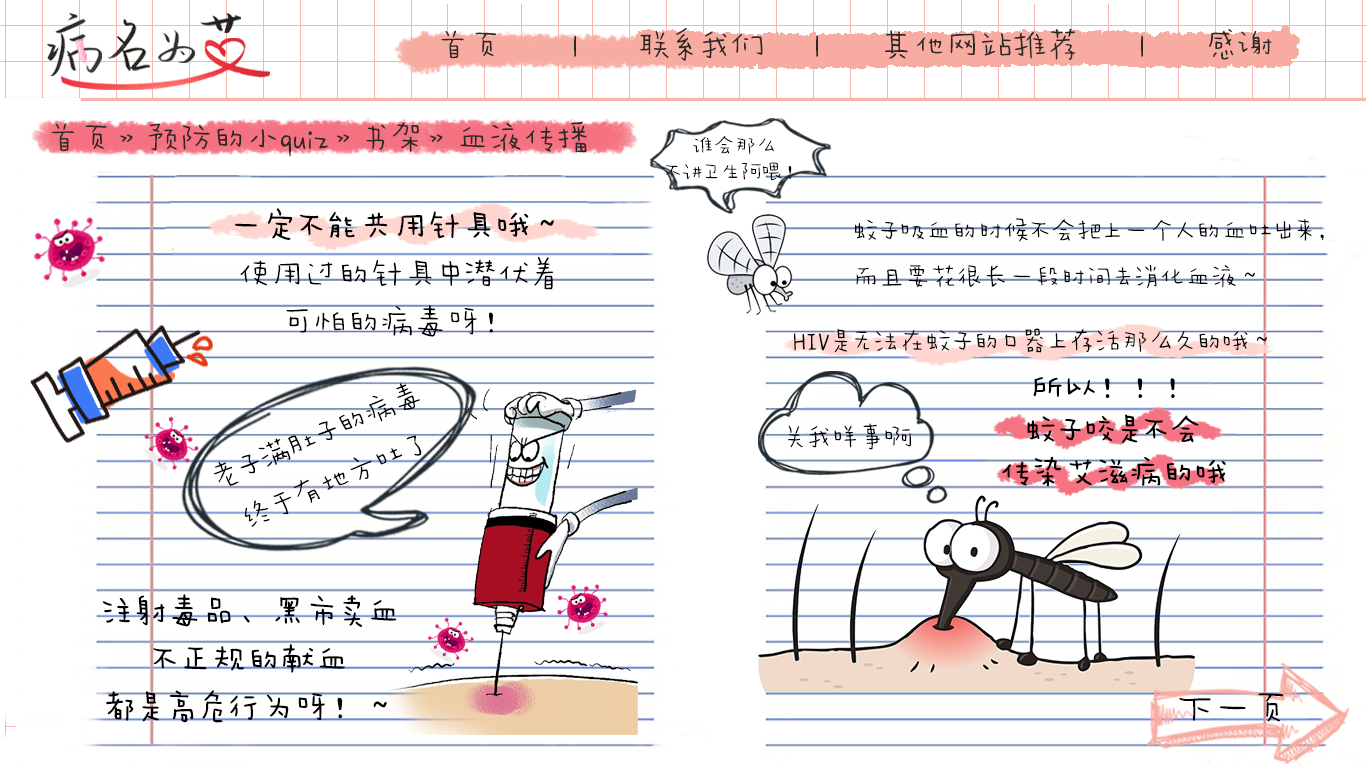
<style>
.page{position:relative;width:1366px;height:768px;background:#ffffff}
.page>*{position:absolute;margin:0}
.t1{font:33.3px "AaWanWan";color:#282a26}
.t2{font:21.2px/26.5px "AaWanWan";color:#000000}
.t3{font:33.3px/48px "AaWanWan";color:#000000}
.t4{font:33.3px/48px "AaWanWan";color:#000000;font-weight:bold}
.t5{font:25.9px/46.1px "AaWanWan";color:#000000}
.t6{font:26.5px "AaWanWan";color:#000000}
.t7{font:31.8px/42.4px "AaWanWan";color:#000000;font-weight:bold}
.t8{font:30px/48px "AaWanWan";color:#000000}
.t9{font:39.9px "AaWanWan";letter-spacing:-0.05em;color:#000000}
</style>
<div class="page">
<p class="t1" style="left:441px;top:27px;width:831px;height:34px">首页       |      联系我们     |      其他网站推荐      |      感谢</p>
<p class="t1" style="left:51px;top:121px;width:536px;height:36px">首页》预防的小quiz》书架》血液传播</p>
<p class="t2" style="left:666px;top:136px;width:126px;height:45px;text-align:center">谁会那么<br>不讲卫生阿喂！</p>
<p class="t3" style="left:235px;top:208px;width:319px;height:129px;text-align:center"><span class="t4">一定不能共用针具哦～<br></span>使用过的针具中潜伏着<br>可怕的病毒呀！</p>
<p class="t5" style="left:855px;top:218px;width:469px;height:70px">蚊子吸血的时候不会把上一个人的血吐出来，<br>而且要花很长一段时间去消化血液～</p>
<p class="t6" style="left:794px;top:328px;width:473px;height:25px">HIV是无法在蚊子的口器上存活那么久的哦～</p>
<p class="t7" style="left:1002px;top:377px;width:224px;height:110px;text-align:center">所以！！！<br>蚊子咬是不会<br>传染艾滋病的哦</p>
<p class="t8" style="left:213px;top:383px;width:209px;height:144px;text-align:center;rotate:-23deg">老子满肚子的病毒<br>终于有地方吐了</p>
<p class="t6" style="left:788px;top:423px;width:123px;height:27px">关我咩事啊</p>
<p class="t4" style="left:102px;top:594px;width:295px;height:129px;text-align:center">注射毒品、黑市卖血<br>不正规的献血<br>都是高危行为呀！～</p>
<p class="t9" style="left:1179px;top:693px;width:105px;height:29px">下一页</p>
</div>
